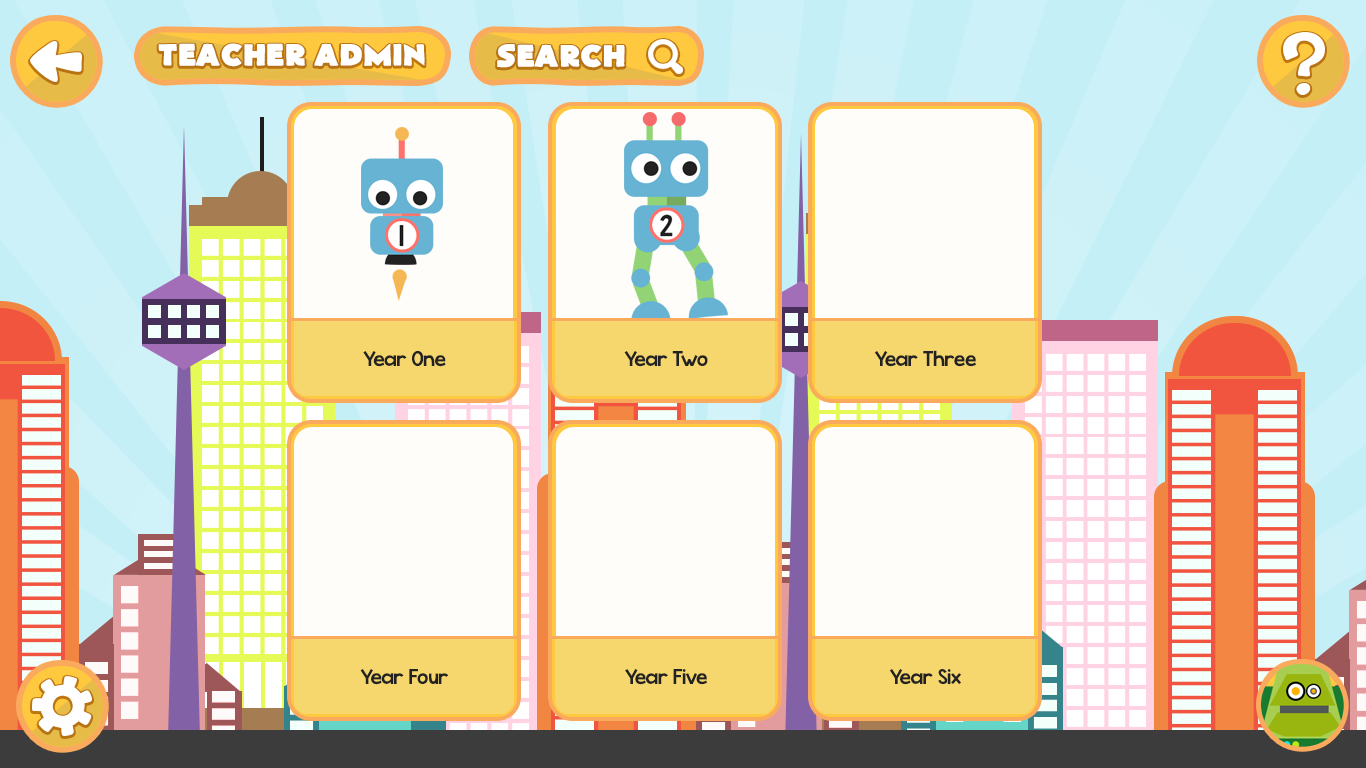
<style>
.page{position:relative;width:1366px;height:768px;background:#fefdf9}
.page>*{position:absolute;margin:0}
.t1{font:30px "FlatBread";color:#ffffff}
.t2{font:22px "KGWhattheTeacherWants";color:#222222}
</style>
<div class="page">
<p class="t1" style="left:158px;top:43px;width:267px;height:24px">Teacher Admin</p>
<p class="t1" style="left:497px;top:44px;width:128px;height:24px">Search</p>
<p class="t2" style="left:363px;top:351px;width:83px;height:16px">Year One</p>
<p class="t2" style="left:624px;top:351px;width:84px;height:16px">Year Two</p>
<p class="t2" style="left:874px;top:350px;width:102px;height:17px">Year Three</p>
<p class="t2" style="left:360px;top:669px;width:89px;height:16px">Year Four</p>
<p class="t2" style="left:625px;top:669px;width:82px;height:16px">Year Five</p>
<p class="t2" style="left:889px;top:669px;width:72px;height:16px">Year Six</p>
</div>
